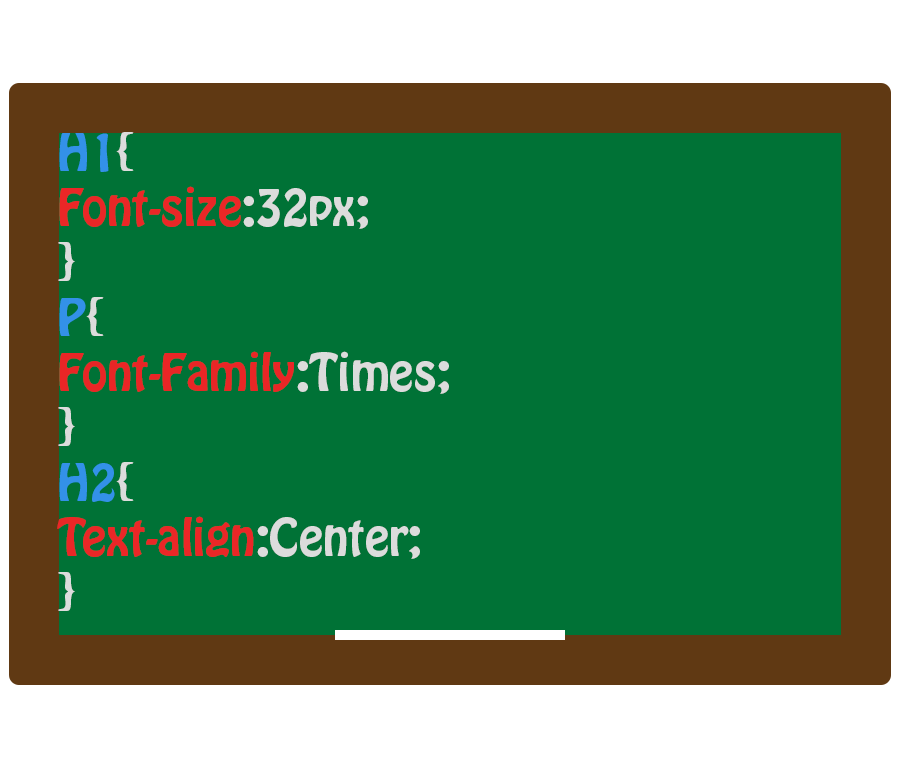
<style>
.page{position:relative;width:900px;height:768px;background:#007236}
.page>*{position:absolute;margin:0}
.t1{font:45.8px "HoboStd";color:#e92626}
.t2{font:45.8px "HoboStd";color:#3391e8}
.t3{font:45.8px "HoboStd";color:#dcdcdc}
.t4{font:45.8px "HoboStd";color:#ea2727}
</style>
<div class="page">
<p class="t1" style="left:57px;top:132px;width:392px;height:479px"><span class="t2">H1</span><span class="t3">{<br></span><span class="t4">Font-size</span><span class="t3">:32px;<br>}<br></span><span class="t2">P</span><span class="t3">{<br></span>Font-Family<span class="t3">:Times;<br>}<br></span><span class="t2">H2</span><span class="t3">{<br></span><span class="t4">Text-align</span><span class="t3">:Center;<br>}</span></p>
</div>
